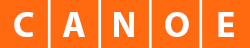
<style>
.page{position:relative;width:250px;height:48px;background:#ff690f}
.page>*{position:absolute;margin:0}
.t1{font:36px "MyriadPro-Bold";letter-spacing:0.74em;color:#fefefe}
.t2{font:36px "MyriadPro-Bold";letter-spacing:0.75em;color:#fefefe}
</style>
<div class="page">
<p class="t1" style="left:14px;top:12px;width:220px;height:25px"><span class="t2">CA</span>NOE</p>
</div>
